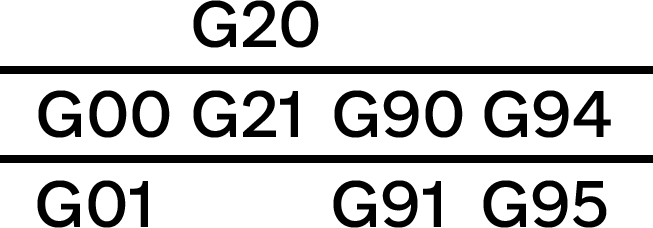
<style>
.page{position:relative;width:653px;height:228px;background:#ffffff}
.page>*{position:absolute;margin:0}
.t1{font:62px "e-UkraineHead-Regular";color:#000000}
</style>
<div class="page">
<p class="t1" style="left:193px;top:0px;width:126px;height:48px">G20</p>
<p class="t1" style="left:38px;top:90px;width:132px;height:48px">G00</p>
<p class="t1" style="left:193px;top:90px;width:105px;height:48px">G21</p>
<p class="t1" style="left:334px;top:90px;width:129px;height:48px">G90</p>
<p class="t1" style="left:484px;top:90px;width:127px;height:48px">G94</p>
<p class="t1" style="left:37px;top:180px;width:111px;height:48px">G01</p>
<p class="t1" style="left:333px;top:180px;width:108px;height:48px">G91</p>
<p class="t1" style="left:483px;top:180px;width:124px;height:48px">G95</p>
</div>
